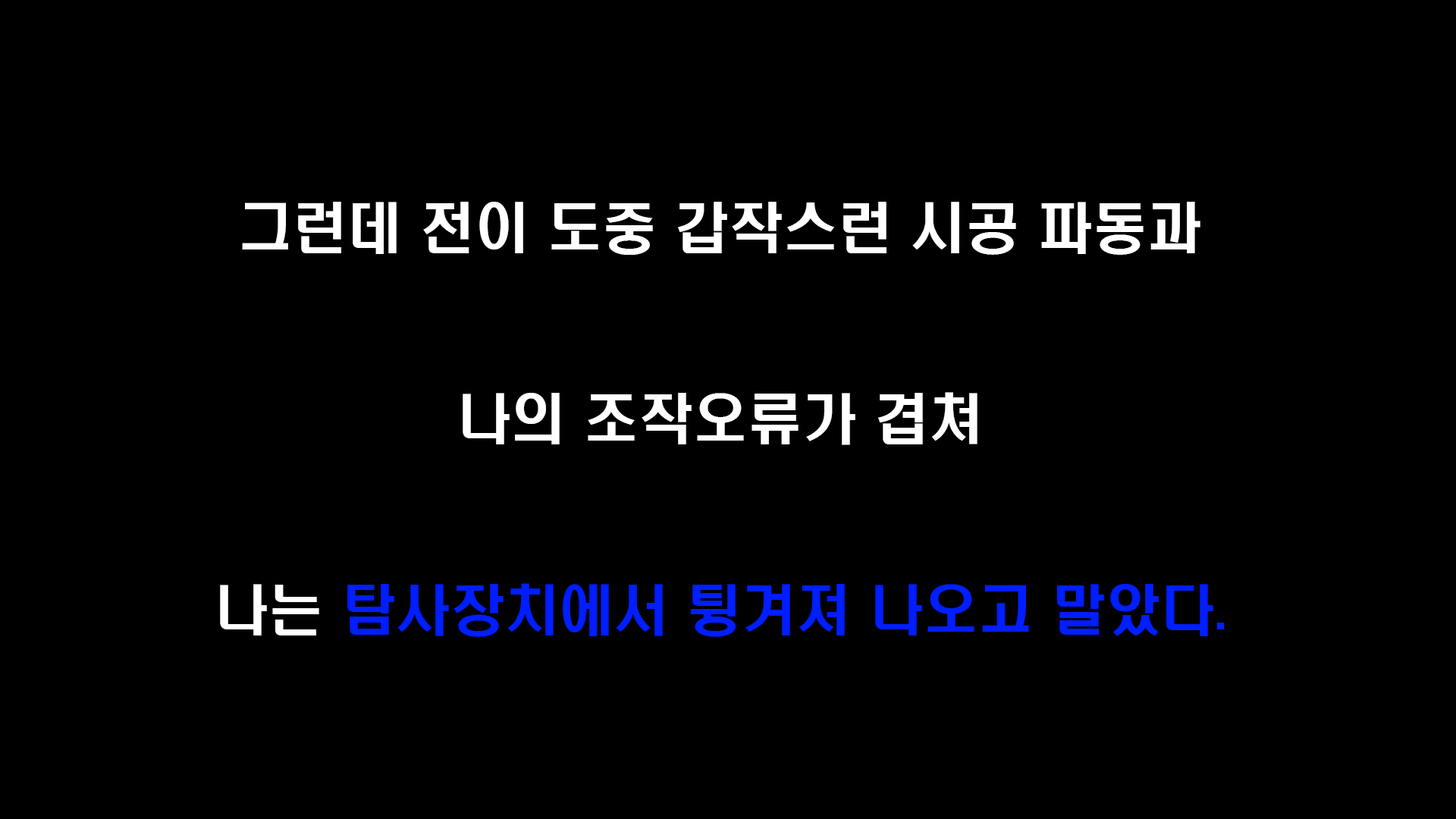
<style>
.page{position:relative;width:1456px;height:819px;background:#000000}
.page>*{position:absolute;margin:0}
.t1{font:54.6px "H2hdrM";color:#ffffff}
.t2{font:54.6px "H2hdrM";color:#001eff}
</style>
<div class="page">
<p class="t1" style="left:220px;top:202px;width:1005px;height:435px;text-align:center">그런데 전이 도중 갑작스런 시공 파동과<br><br>나의 조작오류가 겹쳐 <br><br>나는 <span class="t2">탐사장치에서 튕겨져 나오고 말았다.</span></p>
</div>
